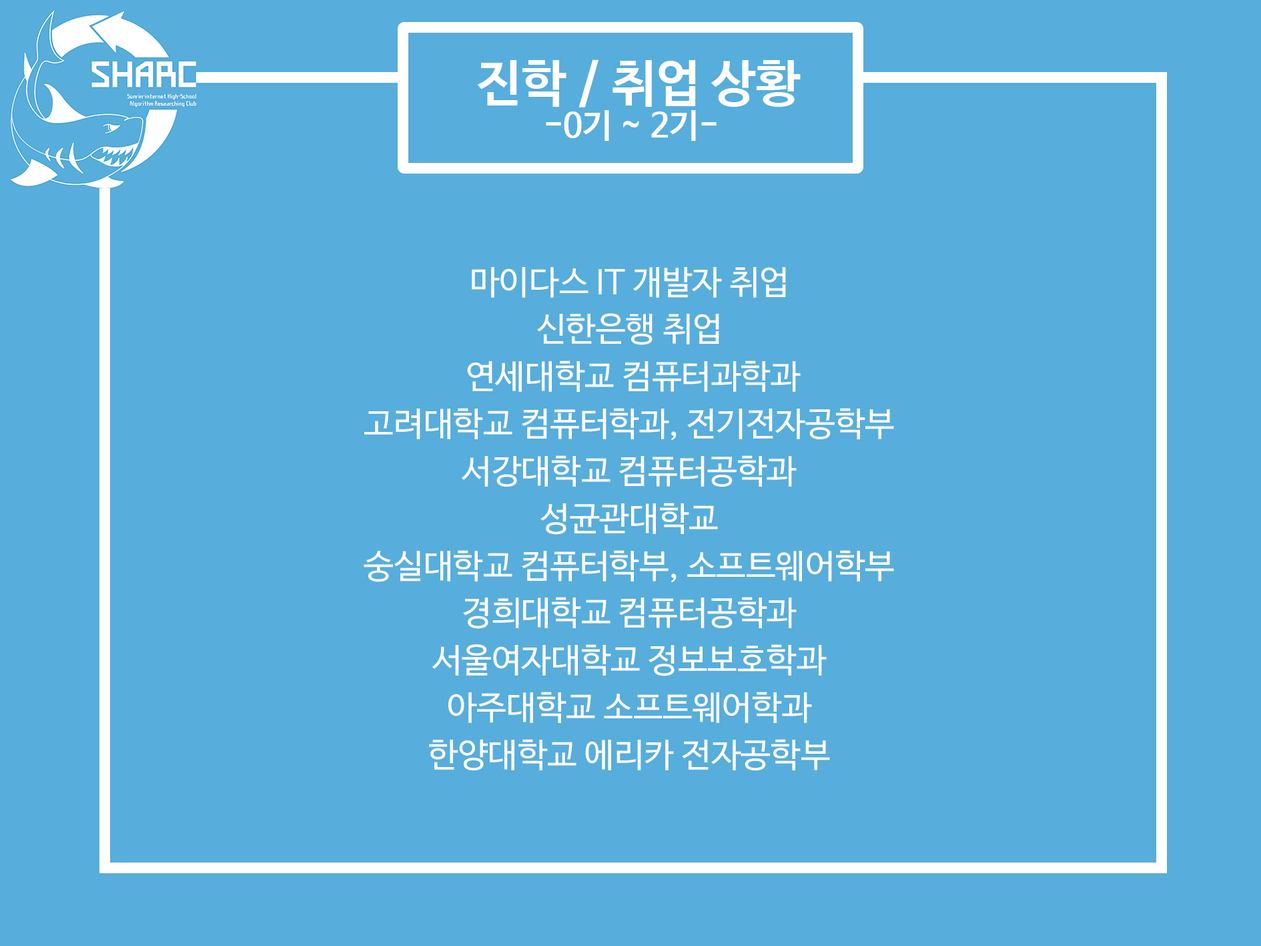
<style>
.page{position:relative;width:1261px;height:946px;background:#57addb}
.page>*{position:absolute;margin:0}
.t1{font:50px "NanumBarunGothicBold";color:#ffffff}
.t2{font:33.4px "NanumBarunGothicBold";color:#ffffff}
.t3{font:33.4px/47.3px "NanumBarunGothic";color:#ffffff}
</style>
<div class="page">
<p class="t1" style="left:477px;top:59px;width:324px;height:48px">진학 / 취업 상황</p>
<p class="t2" style="left:546px;top:110px;width:171px;height:31px">-0기 ~ 2기-</p>
<p class="t3" style="left:364px;top:267px;width:530px;height:503px;text-align:center">마이다스 IT 개발자 취업<br>신한은행 취업<br> 연세대학교 컴퓨터과학과<br>고려대학교 컴퓨터학과, 전기전자공학부<br>서강대학교 컴퓨터공학과<br>성균관대학교<br>숭실대학교 컴퓨터학부, 소프트웨어학부<br>경희대학교 컴퓨터공학과  <br>서울여자대학교 정보보호학과<br>아주대학교 소프트웨어학과<br>한양대학교 에리카 전자공학부<br><br>연세대학교 컴퓨터과학과, <br> 고려대학교 신소재공학부, 성균관대학교 소프트웨어학과</p>
</div>
